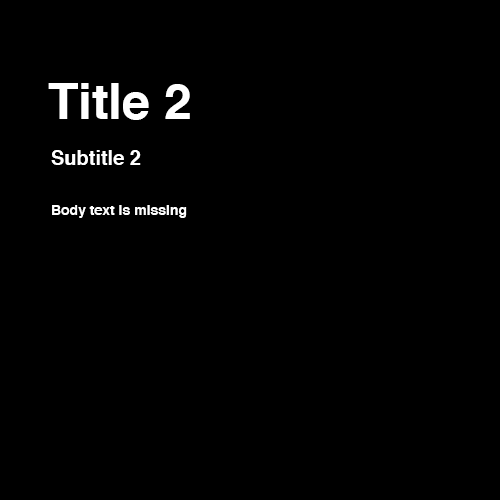
<style>
.page{position:relative;width:500px;height:500px;background:#000000}
.page>*{position:absolute;margin:0}
.t1{font:50px "Helvetica-Bold";color:#ffffff}
.t2{font:20px "Helvetica-Bold";color:#ffffff}
.t3{font:14px "Helvetica-Bold";color:#ffffff}
</style>
<div class="page">
<p class="t1" style="left:48px;top:83px;width:142px;height:37px">Title 2</p>
<p class="t2" style="left:51px;top:150px;width:90px;height:15px">Subtitle 2</p>
<p class="t3" style="left:52px;top:205px;width:135px;height:13px">Body text is missing</p>
</div>
